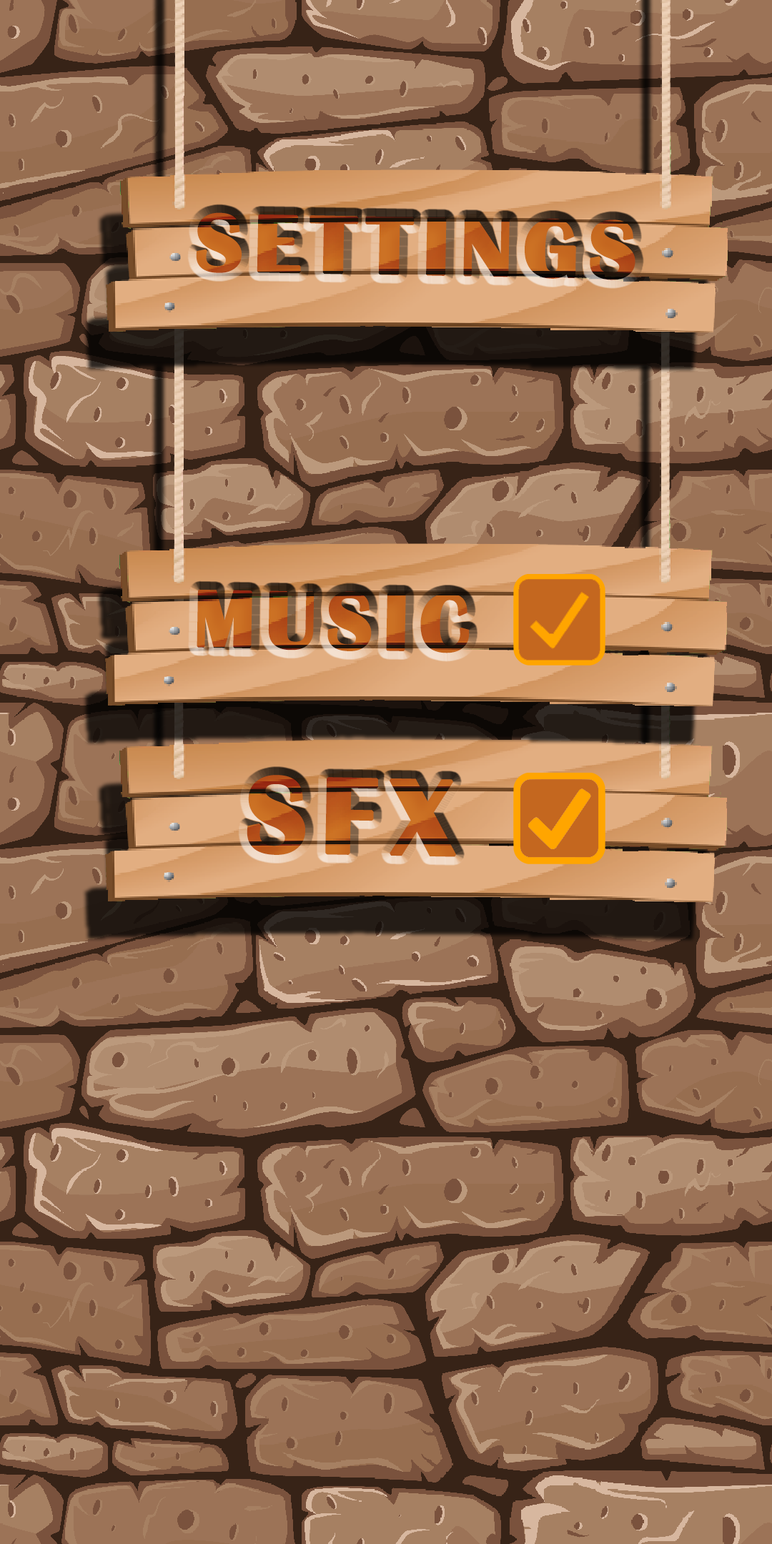
<style>
.page{position:relative;width:772px;height:1544px}
.page>*{position:absolute;margin:0}
.t1{font:83.6px "BritannicBold";letter-spacing:0.101em;color:#c3651f;font-weight:bold;scale:1.03 1}
.t2{font:83.2px "BritannicBold";letter-spacing:0.101em;color:#c3651e;font-weight:bold}
.t3{font:111.2px "BritannicBold";letter-spacing:0.101em;color:#bd5c1d;font-weight:bold}
</style>
<div class="page">
<p class="t1" style="left:196px;top:212px;width:440px;height:68px;rotate:1deg">SETTINGS</p>
<p class="t2" style="left:197px;top:589px;width:273px;height:64px;rotate:1deg">MUSIC</p>
<p class="t3" style="left:247px;top:775px;width:209px;height:82px;rotate:1deg">SFX</p>
</div>
